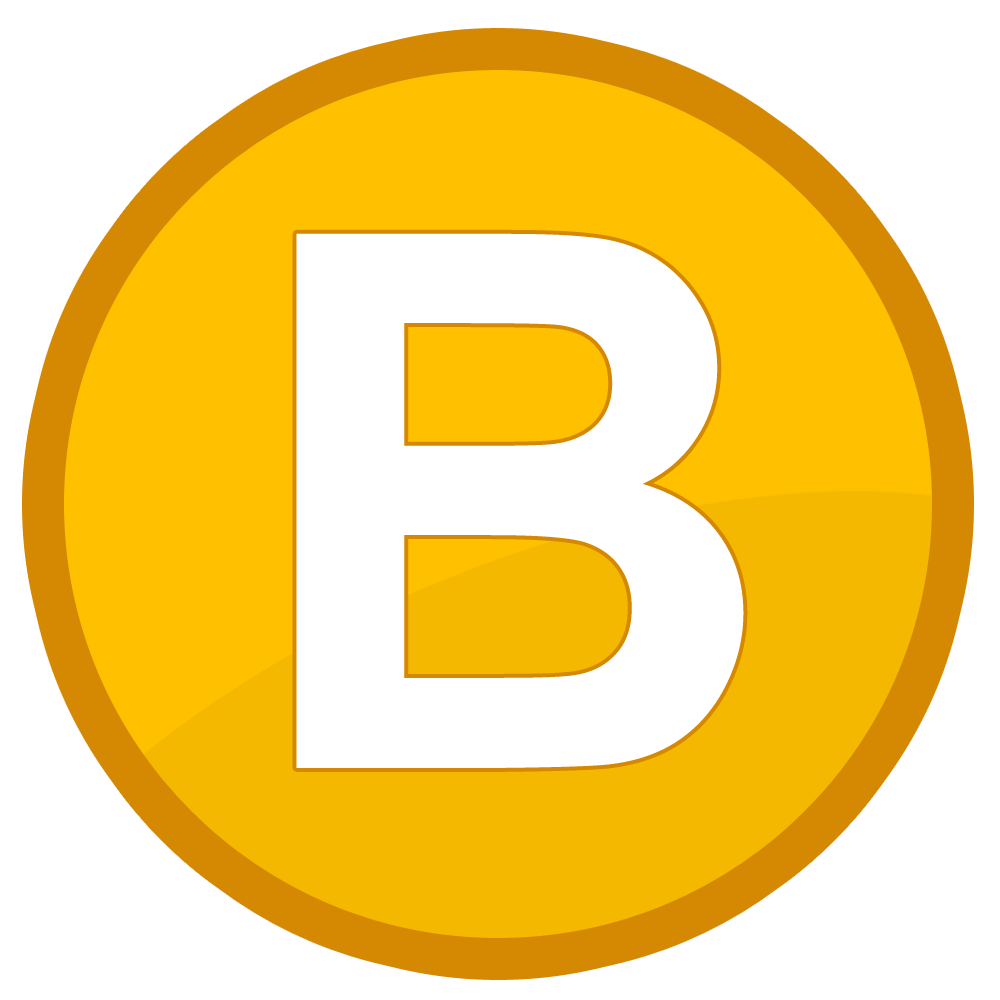
<style>
.page{position:relative;width:1000px;height:1000px;background:#ffffff}
.page>*{position:absolute;margin:0}
.t1{font:745px "Arial-BoldMT";color:#ffffff}
</style>
<div class="page">
<p class="t1" style="left:296px;top:233px;width:448px;height:535px">B</p>
</div>
